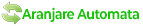
<style>
.page{position:relative;width:143px;height:26px;background:#ffffff}
.page>*{position:absolute;margin:0}
.t1{font:14.3px "Montserrat-Bold";letter-spacing:-0.04em;color:#1ac204;scale:0.88 1}
</style>
<div class="page">
<p class="t1" style="left:21px;top:7px;width:118px;height:15px">Aranjare Automata</p>
</div>
